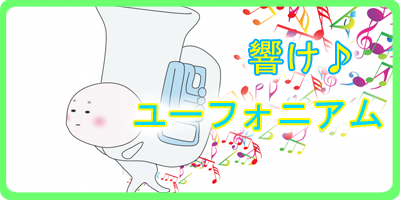
<style>
.page{position:relative;width:400px;height:200px;background:#ffffff}
.page>*{position:absolute;margin:0}
.t1{font:36px "MS-Gothic";color:#fffc00}
.t2{font:36px "MS-Gothic";color:#00d8ff}
</style>
<div class="page">
<p class="t1" style="left:249px;top:40px;width:101px;height:34px">響け♪</p>
<p class="t2" style="left:134px;top:99px;width:248px;height:31px">ユーフォニアム</p>
</div>
